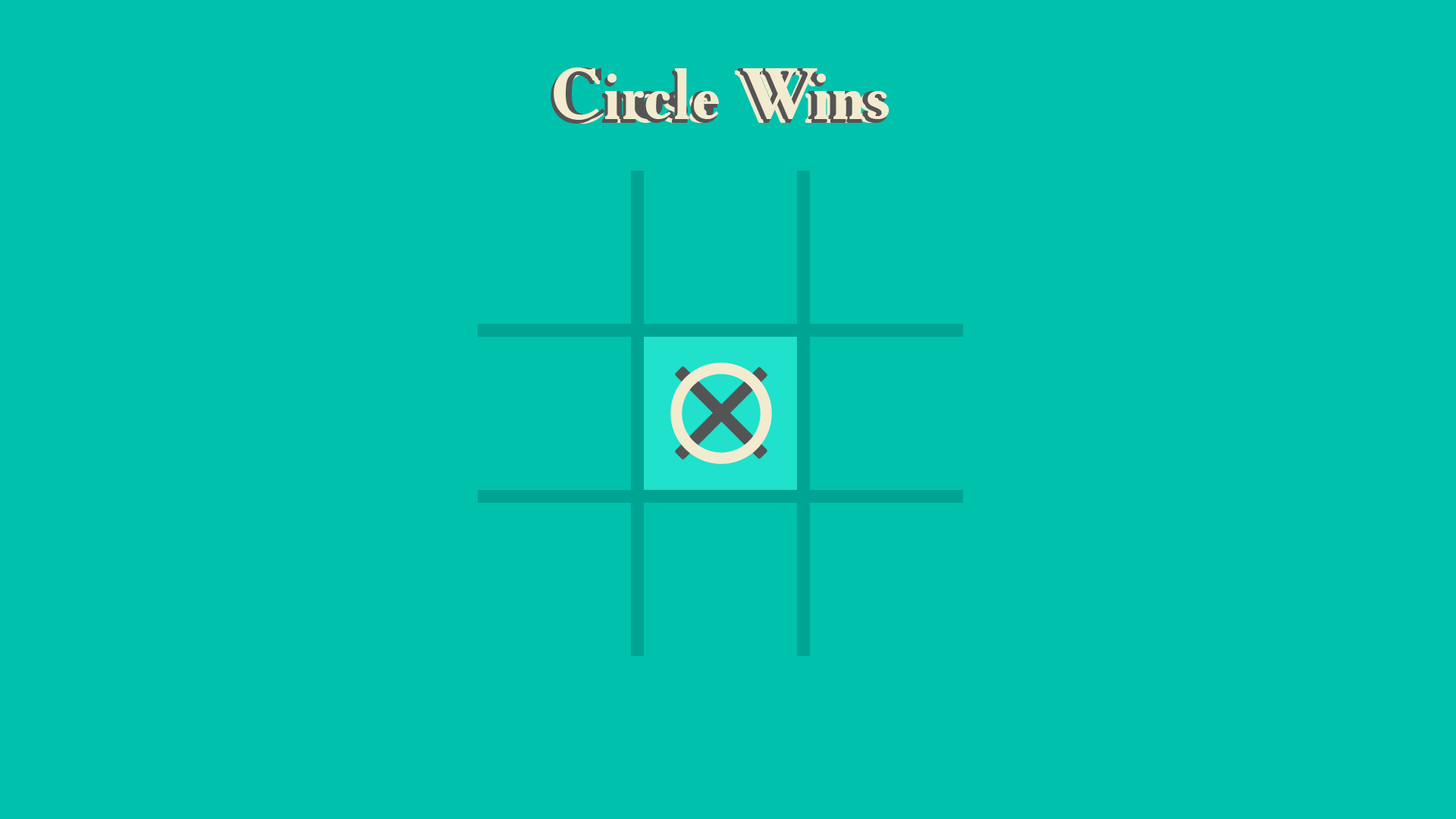
<style>
.page{position:relative;width:1456px;height:819px;background:#00c1ac}
.page>*{position:absolute;margin:0}
.t1{font:72px "AcademyACTT-Bold";color:#f3ebd0}
</style>
<div class="page">
<p class="t1" style="left:554px;top:67px;width:336px;height:53px">Circle Wins</p>
</div>
